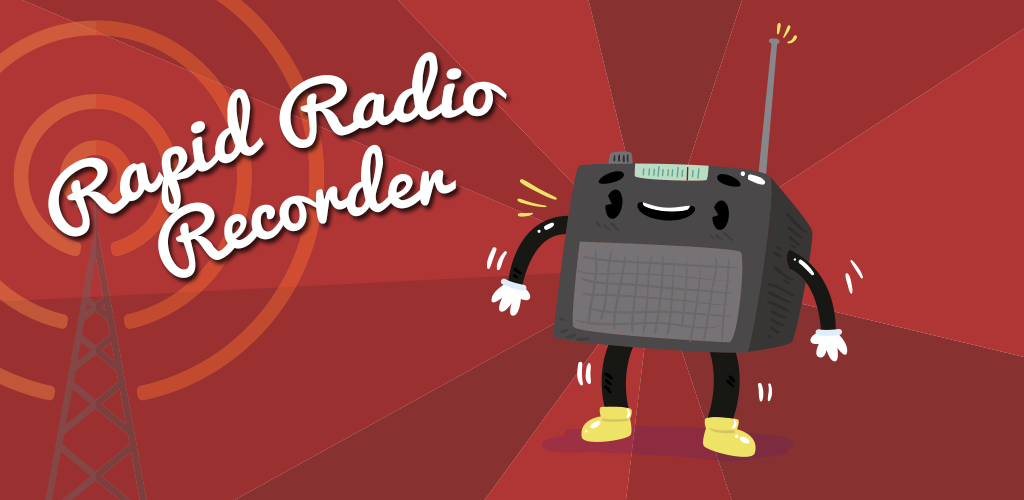
<style>
.page{position:relative;width:1024px;height:500px;background:#9a3030}
.page>*{position:absolute;margin:0}
.t1{font:70.8px "Pacifico";letter-spacing:0.025em;color:#feffff}
</style>
<div class="page">
<p class="t1" style="left:48px;top:52px;width:459px;height:226px;text-align:center;rotate:-15deg">Rapid Radio <br>Recorder</p>
</div>
